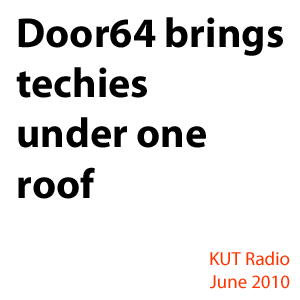
<style>
.page{position:relative;width:300px;height:300px;background:#ffffff}
.page>*{position:absolute;margin:0}
.t1{font:41.8px "MyriadPro-Bold";color:#000000}
.t2{font:18.9px "MyriadPro-Regular";color:#ff3300}
</style>
<div class="page">
<p class="t1" style="left:16px;top:17px;width:267px;height:182px">Door64 brings<br>techies <br>under one <br>roof</p>
<p class="t2" style="left:209px;top:251px;width:81px;height:38px;text-align:right">KUT Radio<br>June 2010</p>
</div>
